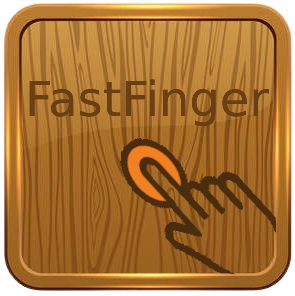
<style>
.page{position:relative;width:295px;height:296px}
.page>*{position:absolute;margin:0}
.t1{font:48px "Verdana";color:#6a4013}
</style>
<div class="page">
<p class="t1" style="left:29px;top:79px;width:241px;height:47px">FastFinger</p>
</div>
